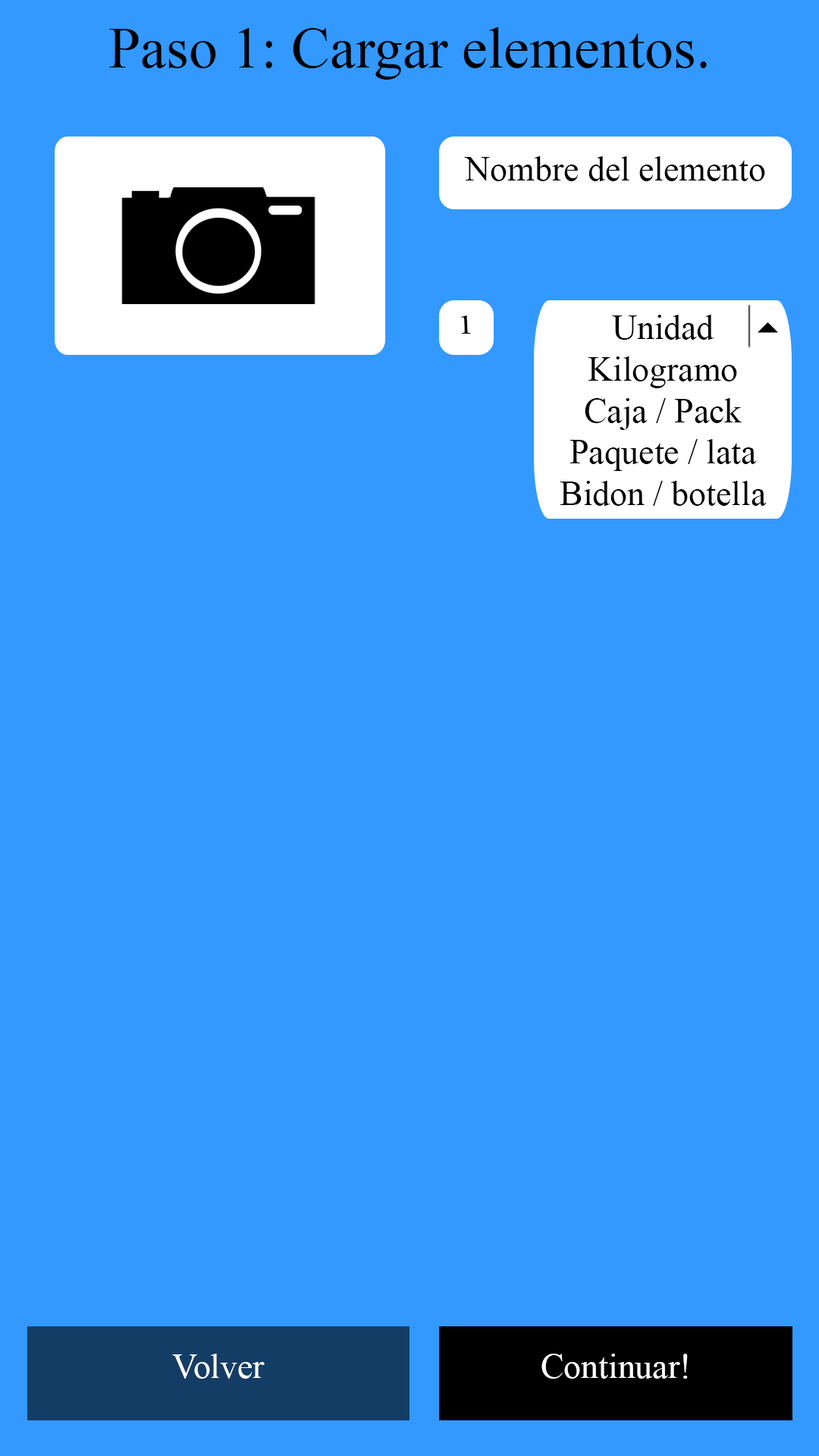
<style>
.page{position:relative;width:819px;height:1456px;background:#3399ff}
.page>*{position:absolute;margin:0}
.t1{font:57.8px "TimesNewRomanPSMT";color:#000000}
.t2{font:34.7px "TimesNewRomanPSMT";color:#000000}
.t3{font:27.4px "TimesNewRomanPSMT";color:#000000;scale:1.26 1}
.t4{font:34.7px "TimesNewRomanPSMT";color:#ffffff}
</style>
<div class="page">
<p class="t1" style="left:109px;top:27px;width:598px;height:53px">Paso 1: Cargar elementos.</p>
<p class="t2" style="left:464px;top:156px;width:301px;height:25px">Nombre del elemento</p>
<p class="t3" style="left:460px;top:315px;width:11px;height:19px">1</p>
<p class="t2" style="left:560px;top:315px;width:207px;height:191px;text-align:center">Unidad<br>Kilogramo<br>Caja / Pack<br>Paquete / lata<br>Bidon / botella</p>
<p class="t4" style="left:172px;top:1354px;width:93px;height:25px">Volver</p>
<p class="t4" style="left:541px;top:1354px;width:147px;height:25px">Continuar!</p>
</div>
